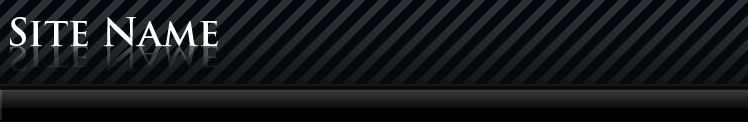
<style>
.page{position:relative;width:748px;height:122px}
.page>*{position:absolute;margin:0}
.t1{font:38.3px "TrajanPro-Bold";color:#ffffff}
.t2{font:32.8px "TrajanPro-Bold";scale:1.17 1}
</style>
<div class="page">
<p class="t1" style="left:10px;top:17px;width:208px;height:29px">Site Name</p>
<p class="t2" style="left:10px;top:46px;width:208px;height:25px">Site Name</p>
</div>
